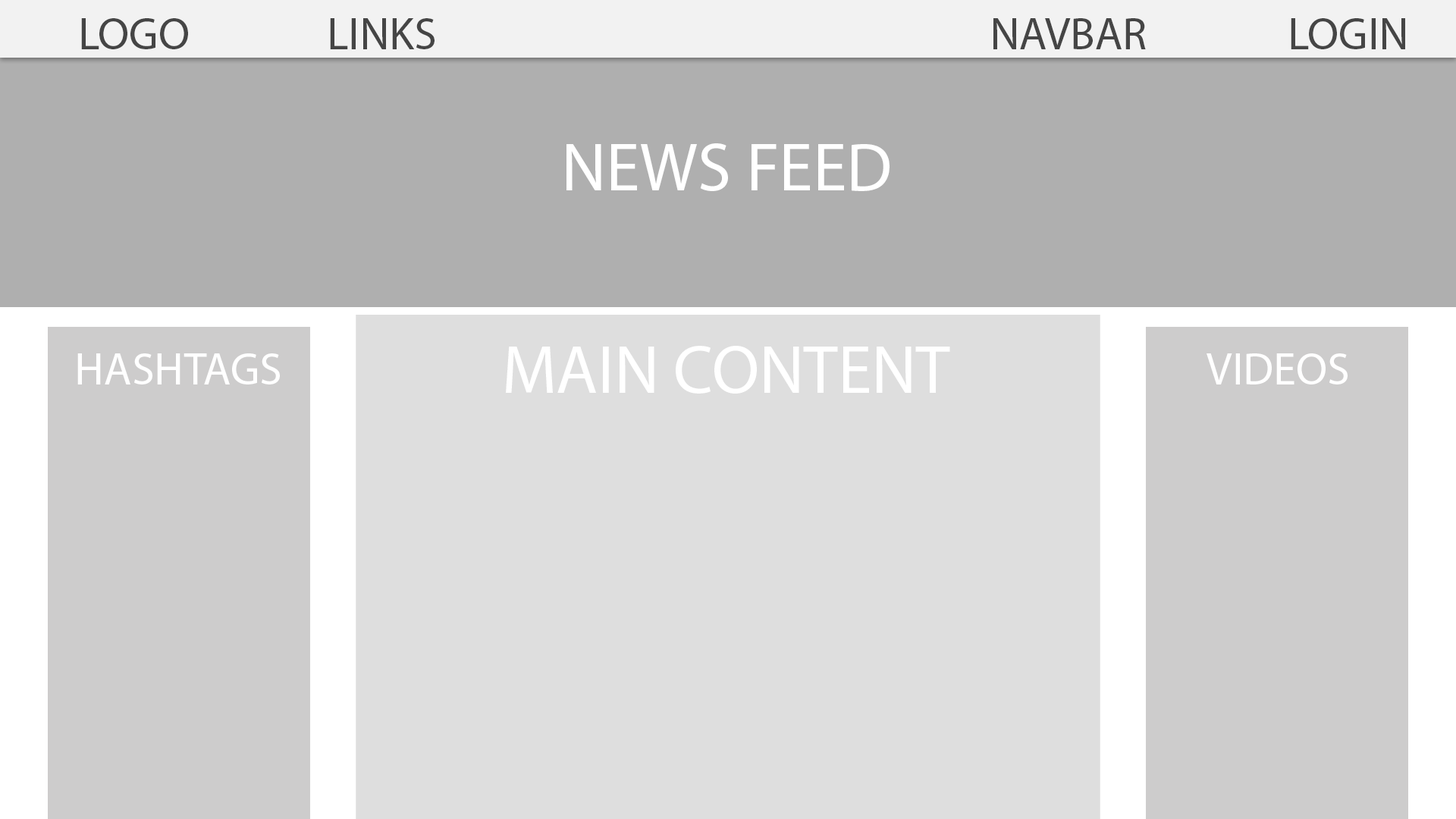
<style>
.page{position:relative;width:1456px;height:819px;background:#dedede}
.page>*{position:absolute;margin:0}
.t1{font:45.5px "MyriadPro-Regular";color:#454545}
.t2{font:68.2px "MyriadPro-Regular";color:#ffffff}
.t3{font:45.5px "MyriadPro-Regular";color:#ffffff}
</style>
<div class="page">
<p class="t1" style="left:81px;top:18px;width:107px;height:31px">LOGO</p>
<p class="t1" style="left:330px;top:18px;width:105px;height:31px">LINKS</p>
<p class="t1" style="left:993px;top:18px;width:153px;height:31px">NAVBAR</p>
<p class="t1" style="left:1291px;top:18px;width:114px;height:31px">LOGIN</p>
<p class="t2" style="left:566px;top:143px;width:324px;height:48px">NEWS FEED</p>
<p class="t3" style="left:77px;top:353px;width:203px;height:31px">HASHTAGS</p>
<p class="t2" style="left:506px;top:346px;width:444px;height:48px">MAIN CONTENT</p>
<p class="t3" style="left:1206px;top:353px;width:142px;height:31px">VIDEOS</p>
</div>
